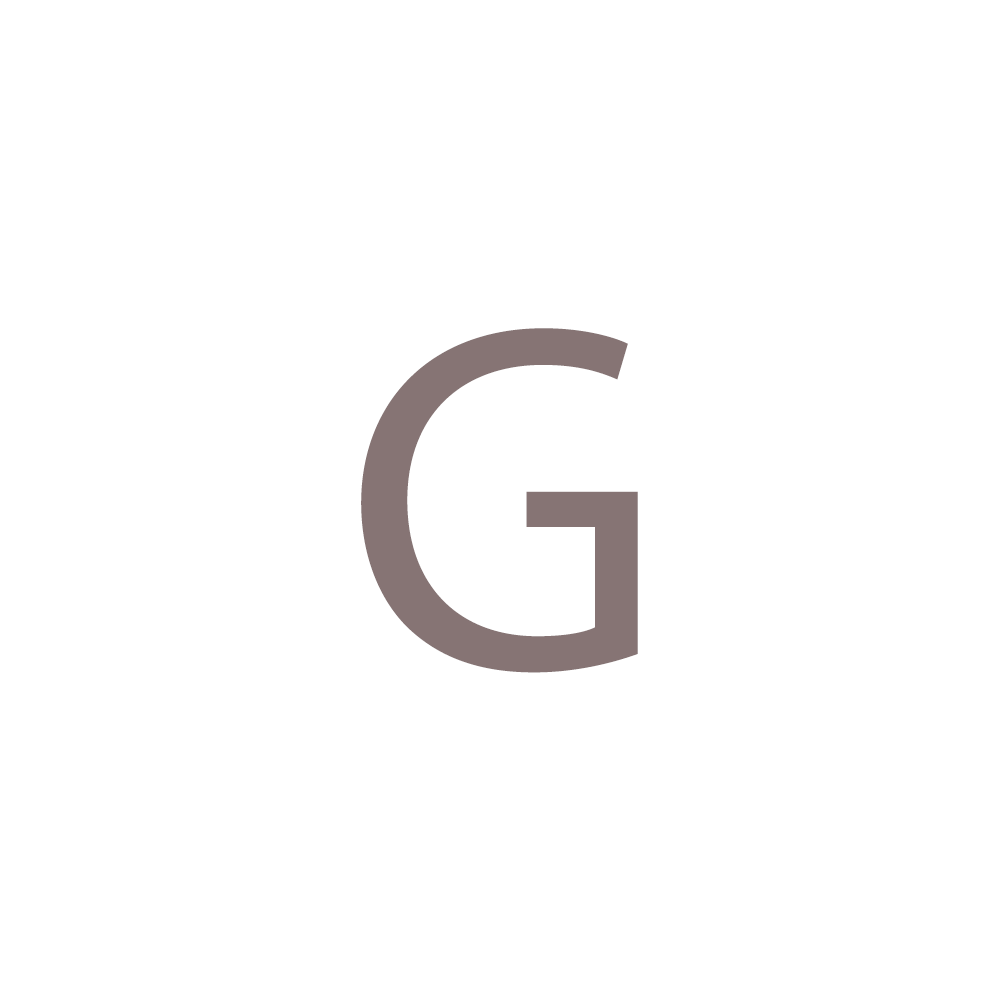
<style>
.page{position:relative;width:1000px;height:1000px;background:#ffffff}
.page>*{position:absolute;margin:0}
.t1{font:500px "MyriadPro-Regular";color:#867474}
</style>
<div class="page">
<p class="t1" style="left:361px;top:328px;width:277px;height:345px">G</p>
</div>
